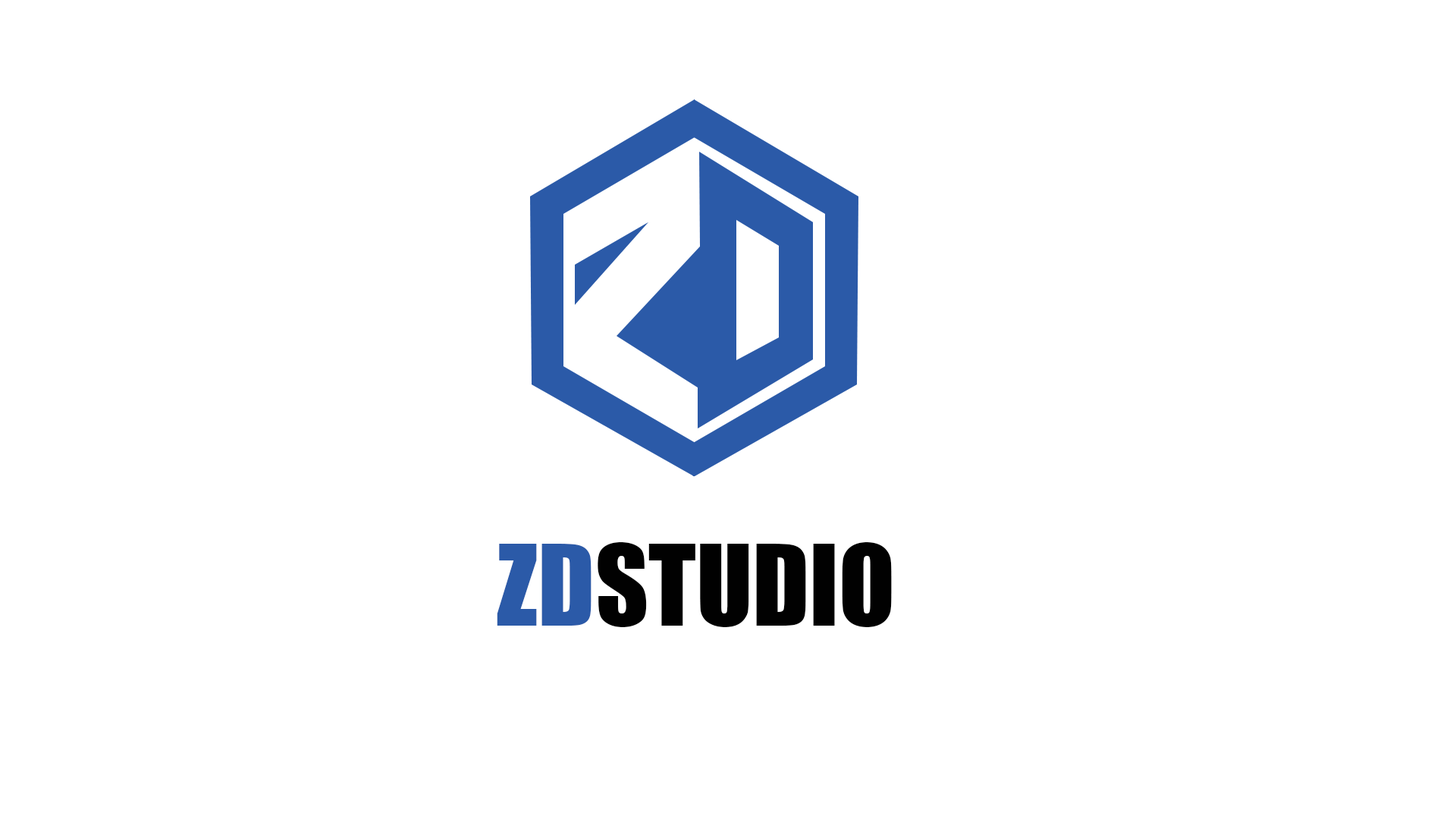
<style>
.page{position:relative;width:1456px;height:819px;background:#ffffff}
.page>*{position:absolute;margin:0}
.t1{font:103.1px "Impact";color:#010101}
.t2{font:103.1px "Impact";color:#2b5aa8}
</style>
<div class="page">
<p class="t1" style="left:497px;top:542px;width:395px;height:85px"><span class="t2">ZD</span>STUDIO</p>
</div>
